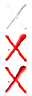
<style>
.page{position:relative;width:32px;height:96px;background:#ffffff}
.page>*{position:absolute;margin:0}
.t1{font:74.8px "Chiller-Regular";letter-spacing:0.02em;color:#ffffff}
.t2{font:74.8px "Chiller-Regular";letter-spacing:0.02em}
</style>
<div class="page">
<p class="t1" style="left:5px;top:1px;width:22px;height:29px">x</p>
<p class="t2" style="left:5px;top:33px;width:22px;height:29px">x</p>
<p class="t2" style="left:5px;top:65px;width:22px;height:29px">x</p>
</div>
